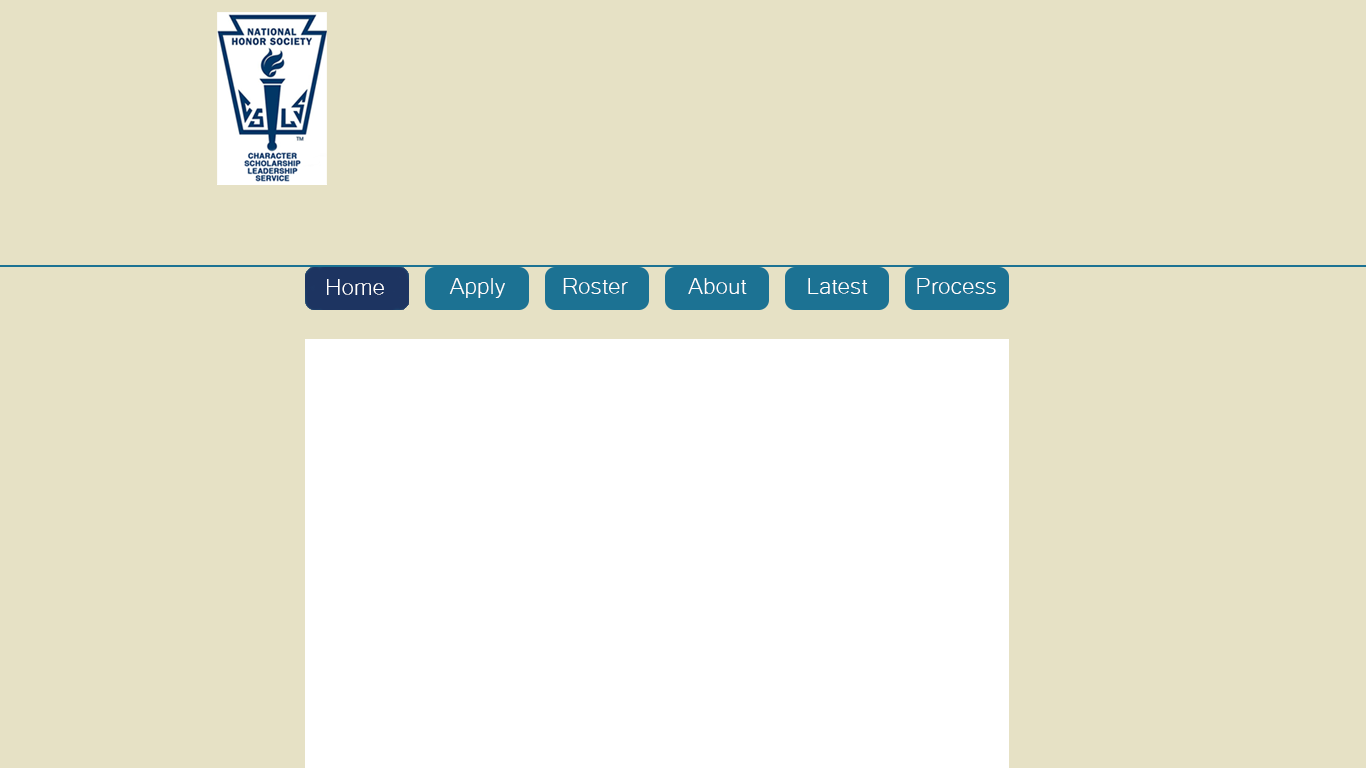
<style>
.page{position:relative;width:1366px;height:768px;background:#e6e1c5}
.page>*{position:absolute;margin:0}
.t1{font:30px "Microsoft-Yi-Baiti";color:#ffffff}
</style>
<div class="page">
<p class="t1" style="left:327px;top:279px;width:57px;height:16px">Home</p>
<p class="t1" style="left:449px;top:278px;width:56px;height:20px">Apply</p>
<p class="t1" style="left:563px;top:278px;width:65px;height:16px">Roster</p>
<p class="t1" style="left:688px;top:278px;width:59px;height:16px">About</p>
<p class="t1" style="left:808px;top:278px;width:60px;height:16px">Latest</p>
<p class="t1" style="left:917px;top:278px;width:79px;height:16px">Process</p>
</div>
